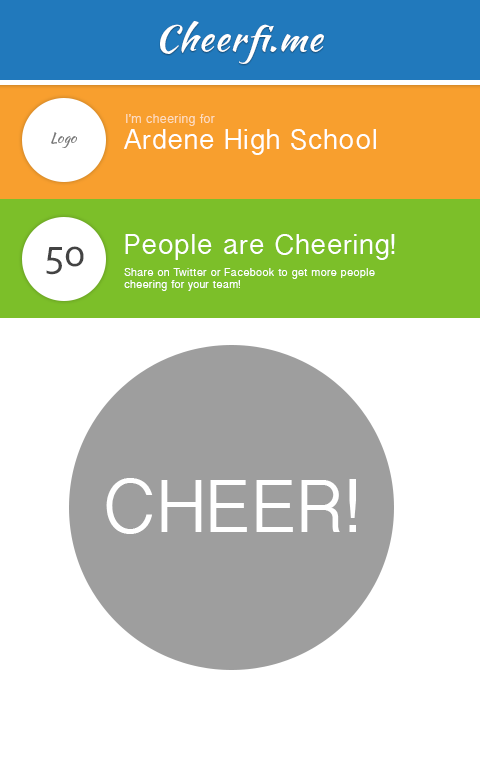
<style>
.page{position:relative;width:480px;height:780px;background:#ffffff}
.page>*{position:absolute;margin:0}
.t1{font:35.9px "KaushanScript-Regular";letter-spacing:0.02em;color:#ffffff;scale:1.04 1}
.t2{font:12.9px "KhmerSangamMN";letter-spacing:0.02em;color:#fcdcbe}
.t3{font:14px "KaushanScript-Regular";letter-spacing:0.02em;color:#767676}
.t4{font:28.7px "KhmerSangamMN";letter-spacing:0.02em;color:#ffffff}
.t5{font:40.8px "Corbel";letter-spacing:0.02em;color:#434343}
.t6{font:11.1px/11.9px "KhmerSangamMN";letter-spacing:0.02em;color:#ffffff}
.t7{font:75.4px "KhmerSangamMN";letter-spacing:0.02em;color:#ffffff}
</style>
<div class="page">
<p class="t1" style="left:160px;top:21px;width:164px;height:43px">Cheerfi.me</p>
<p class="t2" style="left:126px;top:114px;width:89px;height:12px">I’m cheering for</p>
<p class="t3" style="left:51px;top:132px;width:26px;height:16px">Logo</p>
<p class="t4" style="left:124px;top:129px;width:252px;height:26px">Ardene High School</p>
<p class="t5" style="left:46px;top:246px;width:38px;height:29px">50</p>
<p class="t4" style="left:125px;top:234px;width:270px;height:26px">People are Cheering!</p>
<p class="t6" style="left:124px;top:268px;width:251px;height:23px">Share on Twitter or Facebook to get more people <br>cheering for your team!</p>
<p class="t7" style="left:106px;top:478px;width:250px;height:56px">CHEER!</p>
</div>
